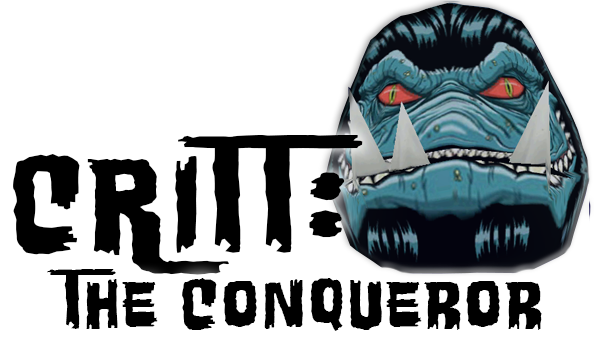
<style>
.page{position:relative;width:600px;height:346px;background:#ffffff}
.page>*{position:absolute;margin:0}
.t1{font:140px "WretchedRemainsBB";letter-spacing:0.025em;color:#000000}
.t2{font:72px "WretchedRemainsBB";letter-spacing:0.025em;color:#000000}
</style>
<div class="page">
<p class="t1" style="left:13px;top:135px;width:350px;height:140px">CRITT:</p>
<p class="t2" style="left:47px;top:269px;width:495px;height:62px">The Conqueror</p>
</div>
